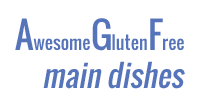
<style>
.page{position:relative;width:200px;height:100px;background:#ffffff}
.page>*{position:absolute;margin:0}
.t1{font:18px "Oswald-Regular";color:#5674b9}
.t2{font:36px "Oswald-Regular";color:#5674b9}
.t3{font:30px "Oswald-Regular";color:#5674b9;font-style:italic}
</style>
<div class="page">
<p class="t1" style="left:15px;top:18px;width:169px;height:33px"><span class="t2">A</span>wesome<span class="t2">G</span>luten<span class="t2">F</span>ree</p>
<p class="t3" style="left:43px;top:61px;width:142px;height:28px">main dishes</p>
</div>
